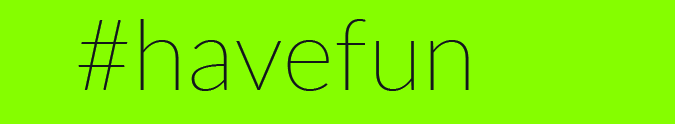
<style>
.page{position:relative;width:675px;height:124px;background:#85fe00}
.page>*{position:absolute;margin:0}
.t1{font:100px "Lato-Thin";color:#141819}
</style>
<div class="page">
<p class="t1" style="left:78px;top:19px;width:391px;height:72px">#havefun</p>
</div>
